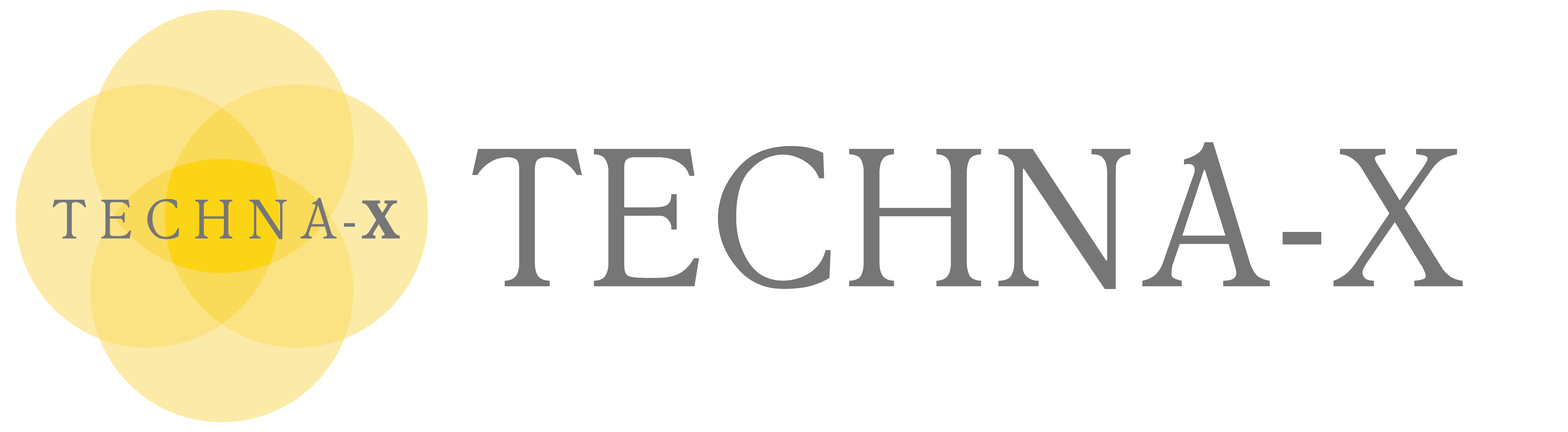
<style>
.page{position:relative;width:1568px;height:432px;background:#ffffff}
.page>*{position:absolute;margin:0}
.t1{font:196px "Antiqua";color:#767677}
</style>
<div class="page">
<p class="t1" style="left:472px;top:142px;width:991px;height:147px">TECHNA-X</p>
</div>
